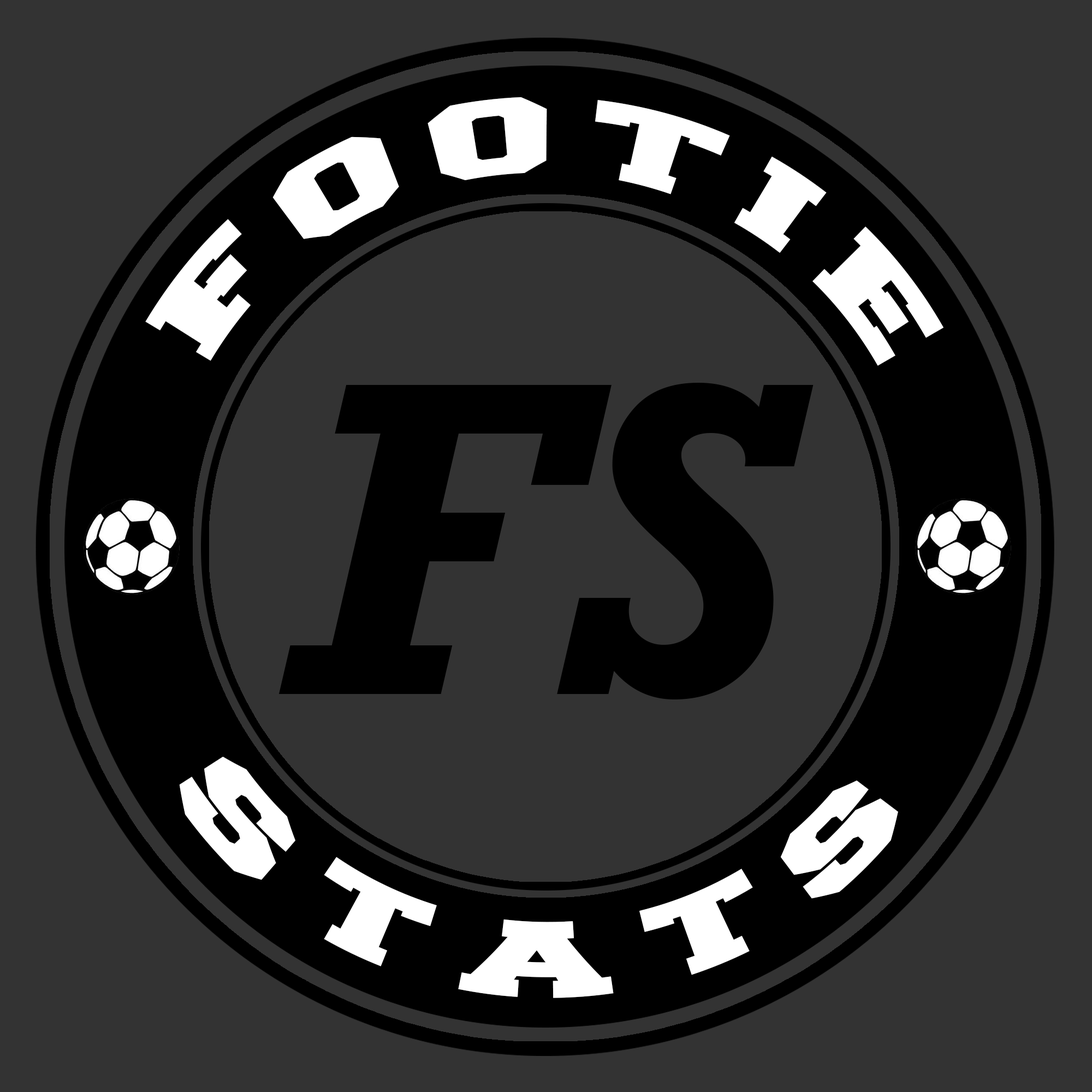
<style>
.page{position:relative;width:1092px;height:1092px;background:#333333}
.page>*{position:absolute;margin:0}
.t1{font:91px "Freshman";letter-spacing:0.2em;color:#ffffff;scale:1.45 1}
.t2{font:455px "Rockwell-BoldItalic";color:#000000}
</style>
<div class="page">
<p class="t1" style="left:145px;top:97px;width:798px;height:269px;rotate:4deg">FOOTIE</p>
<p class="t2" style="left:278px;top:383px;width:536px;height:316px">FS</p>
<p class="t1" style="left:179px;top:756px;width:719px;height:242px;rotate:-1deg">STATS</p>
</div>
